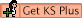
<style>
.page{position:relative;width:82px;height:18px;background:#fbb494}
.page>*{position:absolute;margin:0}
.t1{font:11px "LucidaSansUnicode";letter-spacing:-0.01em;color:#000000;scale:0.97 1}
</style>
<div class="page">
<p class="t1" style="left:23px;top:6px;width:56px;height:9px">Get KS Plus</p>
</div>
